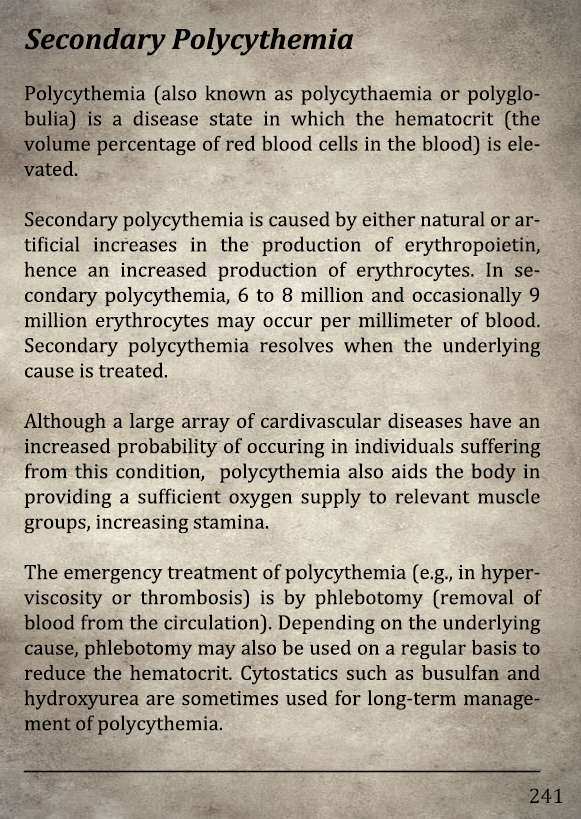
<style>
.page{position:relative;width:581px;height:819px}
.page>*{position:absolute;margin:0}
.t1{font:30px "Cambria-BoldItalic";color:#000000}
.t2{font:21px "Cambria";color:#000000}
.t3{font:21px "Arimo";color:#000000;scale:0.66 1}
.t4{font:21.5px "Cambria";color:#000000}
</style>
<div class="page">
<p class="t1" style="left:24px;top:28px;width:329px;height:28px">Secondary Polycythemia</p>
<p class="t2" style="left:24px;top:85px;width:518px;height:650px;text-align:justify">Polycythemia (also known as polycythaemia or polyglobulia) is a disease state in which the hematocrit (the volume percentage of red blood cells in the blood) is elevated.<br><br>Secondary polycythemia is caused by either natural or artificial increases in the production of erythropoietin, hence an increased production of erythrocytes. In secondary polycythemia, 6 to 8 million and occasionally 9 million erythrocytes may occur per millimeter of blood. Secondary polycythemia resolves when the underlying cause is treated.<br><br>Although a large array of cardivascular diseases have an increased probability of occuring in individuals suffering from this condition,  polycythemia also aids the body in providing a sufficient oxygen supply to relevant muscle groups, increasing stamina.<br><br>The emergency treatment of polycythemia (e.g., in hyperviscosity or thrombosis) is by phlebotomy (removal of blood from the circulation). Depending on the underlying cause, phlebotomy may also be used on a regular basis to reduce the hematocrit. Cytostatics such as busulfan and hydroxyurea are sometimes used for long-term management of polycythemia.</p>
<p class="t3" style="left:23px;top:770px;width:518px;height:3px">___________________________________________________________________</p>
<p class="t4" style="left:530px;top:788px;width:33px;height:15px">241</p>
</div>
